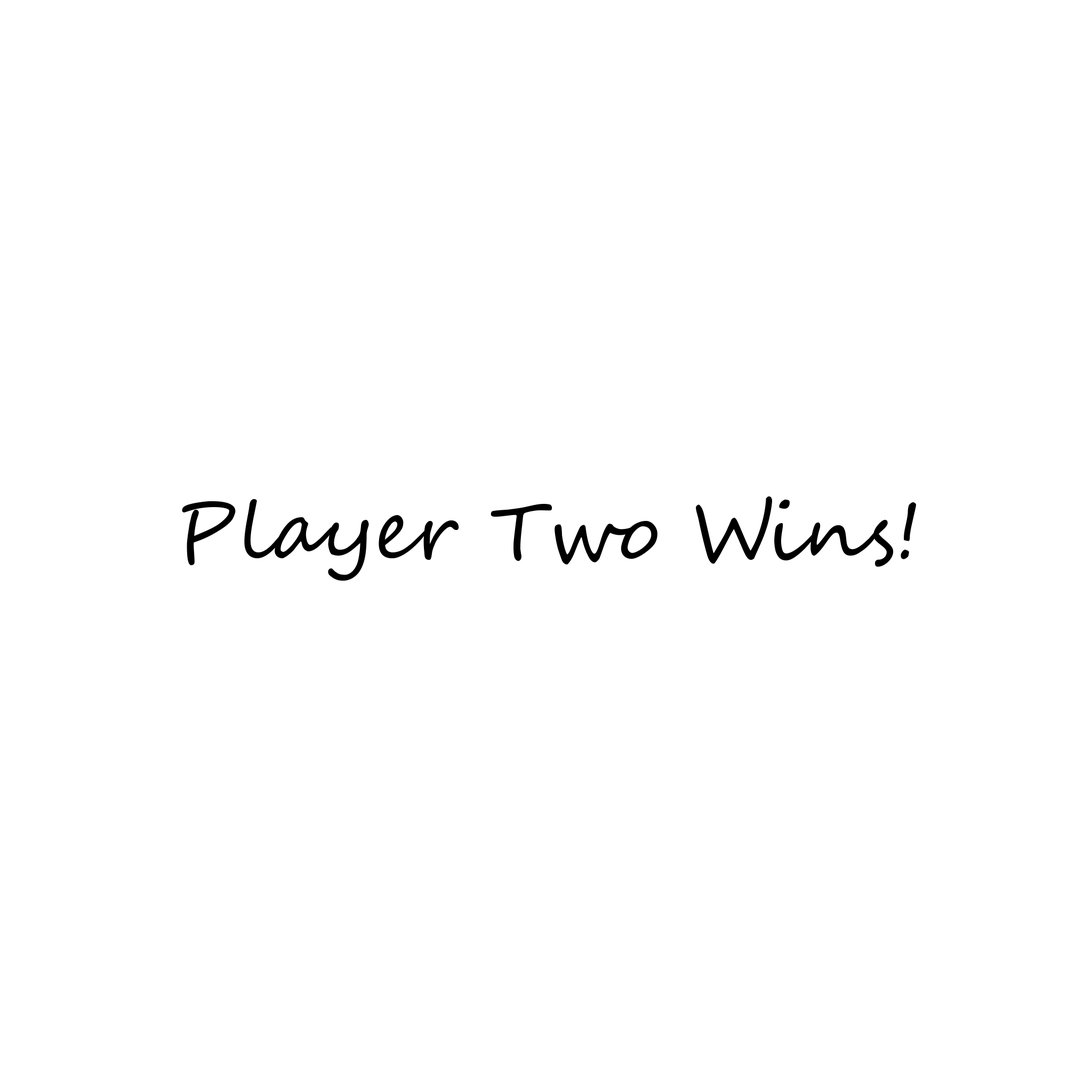
<style>
.page{position:relative;width:1092px;height:1092px;background:#ffffff}
.page>*{position:absolute;margin:0}
.t1{font:80px "SegoeScript";color:#000000}
</style>
<div class="page">
<p class="t1" style="left:182px;top:496px;width:734px;height:85px">Player Two Wins!</p>
</div>
